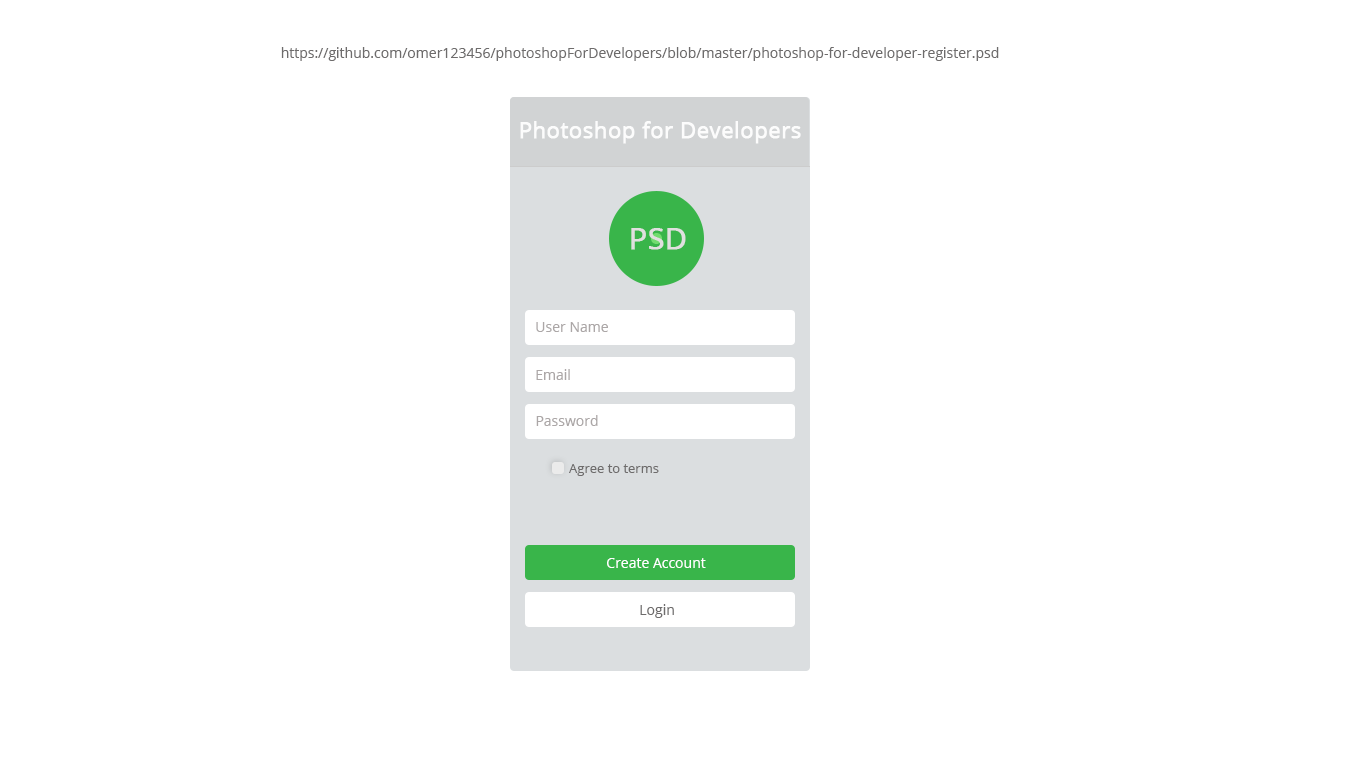
<style>
.page{position:relative;width:1366px;height:768px;background:#ffffff}
.page>*{position:absolute;margin:0}
.t1{font:14px "OpenSans";color:#6e6c6c}
.t2{font:22px "OpenSans";color:#fcfcfc;font-weight:bold}
.t3{font:30px "OpenSans";color:#e0e0df;font-weight:bold}
.t4{font:14px "OpenSans";color:#aca7a7}
.t5{font:13px "OpenSans";color:#6e6c6c}
.t6{font:14px "OpenSans";color:#ffffff}
</style>
<div class="page">
<p class="t1" style="left:281px;top:47px;width:718px;height:14px">https://github.com/omer123456/photoshopForDevelopers/blob/master/photoshop-for-developer-register.psd</p>
<p class="t2" style="left:520px;top:121px;width:281px;height:23px">Photoshop for Developers</p>
<p class="t3" style="left:631px;top:228px;width:55px;height:22px">PSD</p>
<p class="t4" style="left:536px;top:322px;width:72px;height:10px">User Name</p>
<p class="t4" style="left:536px;top:369px;width:34px;height:11px">Email</p>
<p class="t4" style="left:536px;top:415px;width:62px;height:11px">Password</p>
<p class="t5" style="left:569px;top:464px;width:90px;height:12px">Agree to terms</p>
<p class="t6" style="left:607px;top:558px;width:99px;height:10px">Create Account</p>
<p class="t1" style="left:640px;top:604px;width:34px;height:14px">Login</p>
</div>
